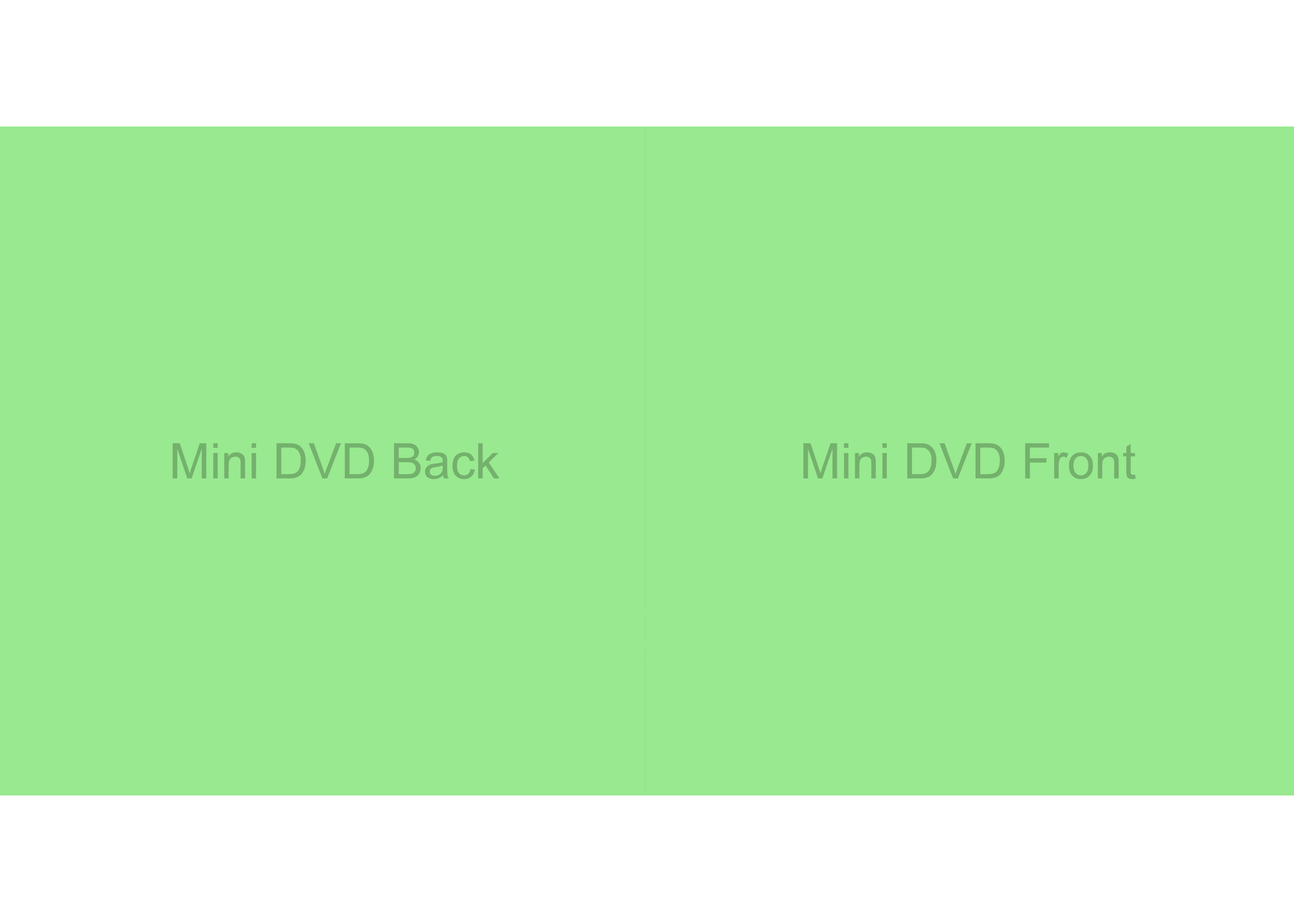
<style>
.page{position:relative;width:1294px;height:922px;background:#98e98f}
.page>*{position:absolute;margin:0}
.t1{font:49.2px "ArialMT";color:#74b16d}
</style>
<div class="page">
<p class="t1" style="left:173px;top:443px;width:326px;height:36px">Mini DVD Back</p>
<p class="t1" style="left:803px;top:443px;width:333px;height:36px">Mini DVD Front</p>
</div>
